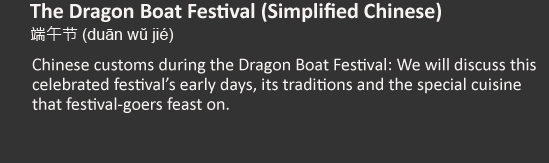
<style>
.page{position:relative;width:549px;height:163px;background:#333333}
.page>*{position:absolute;margin:0}
.t1{font:22px "Calibri-Bold";color:#f8f3f3}
.t2{font:16px "ArialMT";color:#f8f3f3}
.t3{font:16px "MicrosoftJhengHeiRegular";color:#f8f3f3}
.t4{font:18px/19.8px "Calibri";color:#f8f3f3}
</style>
<div class="page">
<p class="t1" style="left:30px;top:2px;width:411px;height:20px">The Dragon Boat Festival (Simplified Chinese)</p>
<p class="t2" style="left:30px;top:26px;width:144px;height:17px"><span class="t3">端午节 </span>(duān wŭ jié)</p>
<p class="t4" style="left:32px;top:58px;width:504px;height:55px">Chinese customs during the Dragon Boat Festival: We will discuss this celebrated festival’s early days, its traditions and the special cuisine that festival-goers feast on.</p>
</div>
